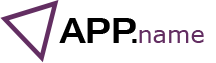
<style>
.page{position:relative;width:216px;height:63px;background:#ffffff}
.page>*{position:absolute;margin:0}
.t1{font:36px "Slicker";color:#000000}
.t2{font:24px "Verdana";color:#632e62}
</style>
<div class="page">
<p class="t1" style="left:59px;top:18px;width:145px;height:25px">APP.<span class="t2">name</span></p>
</div>
